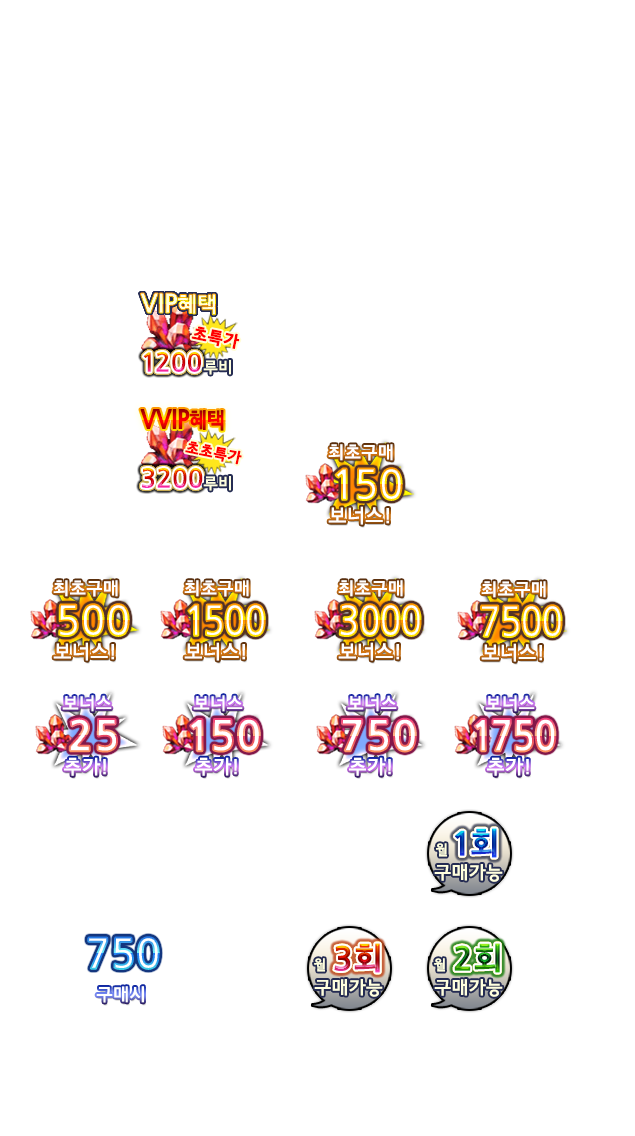
<style>
.page{position:relative;width:635px;height:1136px;background:#ffffff}
.page>*{position:absolute;margin:0}
.t1{font:25.6px "JejuGothic";letter-spacing:-0.05em;color:#ffffdf;font-weight:bold}
.t2{font:22px "JejuGothic";letter-spacing:-0.05em;color:#ffffdf;font-weight:bold}
.t3{font:16.7px "JejuGothic";color:#ff0000;font-weight:bold}
.t4{font:26px "JejuGothic"}
.t5{font:16px "JejuGothic";color:#ffffdf}
.t6{font:25.6px "JejuGothic";letter-spacing:-0.05em;font-weight:bold;scale:0.9 1}
.t7{font:22px "JejuGothic";letter-spacing:-0.05em;font-weight:bold;scale:0.9 1}
.t8{font:14.9px "JejuGothic";color:#ff0000;font-weight:bold}
.t9{font:18px "JejuGothic";color:#ffffff}
.t10{font:41.5px "JejuGothic"}
.t11{font:20px "JejuGothic";color:#ffffff}
.t12{font:41.5px "JejuGothic";letter-spacing:-0.05em;scale:0.9 1}
.t13{font:41.5px "JejuGothic";color:#ffffff;font-weight:bold}
.t14{font:41.5px "JejuGothic";letter-spacing:-0.05em;font-weight:bold;scale:0.9 1}
.t15{font:32px "JejuGothic";font-weight:bold}
.t16{font:14.1px "JejuGothic";color:#ffffdf}
.t17{font:18.7px "JejuGothic";color:#ffffdf}
</style>
<div class="page">
<p class="t1" style="left:140px;top:293px;width:76px;height:22px">VIP<span class="t2">혜택</span></p>
<p class="t3" style="left:191px;top:326px;width:49px;height:23px;rotate:12deg">초특가</p>
<p class="t4" style="left:143px;top:352px;width:58px;height:20px">1200</p>
<p class="t5" style="left:203px;top:360px;width:28px;height:15px">루비</p>
<p class="t6" style="left:140px;top:409px;width:84px;height:22px">VVIP<span class="t7">혜택</span></p>
<p class="t8" style="left:185px;top:441px;width:57px;height:24px;rotate:12deg">초초특가</p>
<p class="t9" style="left:328px;top:444px;width:65px;height:17px">최초구매</p>
<p class="t4" style="left:142px;top:468px;width:61px;height:20px">3200</p>
<p class="t10" style="left:335px;top:468px;width:67px;height:32px">150</p>
<p class="t5" style="left:203px;top:476px;width:28px;height:15px">루비</p>
<p class="t11" style="left:328px;top:506px;width:61px;height:19px">보너스!</p>
<p class="t9" style="left:53px;top:580px;width:65px;height:17px">최초구매</p>
<p class="t9" style="left:184px;top:580px;width:65px;height:17px">최초구매</p>
<p class="t9" style="left:338px;top:580px;width:65px;height:17px">최초구매</p>
<p class="t9" style="left:481px;top:581px;width:65px;height:17px">최초구매</p>
<p class="t10" style="left:59px;top:604px;width:70px;height:32px">500</p>
<p class="t12" style="left:188px;top:604px;width:77px;height:32px">1500</p>
<p class="t12" style="left:339px;top:604px;width:82px;height:32px">3000</p>
<p class="t12" style="left:481px;top:605px;width:81px;height:32px">7500</p>
<p class="t11" style="left:53px;top:642px;width:61px;height:19px">보너스!</p>
<p class="t11" style="left:184px;top:642px;width:61px;height:19px">보너스!</p>
<p class="t11" style="left:338px;top:642px;width:61px;height:19px">보너스!</p>
<p class="t11" style="left:481px;top:643px;width:61px;height:19px">보너스!</p>
<p class="t9" style="left:62px;top:695px;width:50px;height:17px">보너스</p>
<p class="t9" style="left:193px;top:695px;width:50px;height:17px">보너스</p>
<p class="t9" style="left:347px;top:695px;width:50px;height:17px">보너스</p>
<p class="t9" style="left:485px;top:695px;width:50px;height:17px">보너스</p>
<p class="t13" style="left:69px;top:718px;width:48px;height:34px">25</p>
<p class="t13" style="left:190px;top:718px;width:70px;height:34px">150</p>
<p class="t13" style="left:342px;top:718px;width:74px;height:34px">750</p>
<p class="t14" style="left:474px;top:718px;width:82px;height:34px">1750</p>
<p class="t11" style="left:64px;top:757px;width:42px;height:19px">추가!</p>
<p class="t11" style="left:195px;top:757px;width:42px;height:19px">추가!</p>
<p class="t11" style="left:349px;top:757px;width:42px;height:19px">추가!</p>
<p class="t11" style="left:487px;top:757px;width:42px;height:19px">추가!</p>
<p class="t15" style="left:455px;top:828px;width:42px;height:30px">1회</p>
<p class="t16" style="left:436px;top:843px;width:11px;height:14px">월</p>
<p class="t17" style="left:434px;top:864px;width:69px;height:18px">구매가능</p>
<p class="t10" style="left:88px;top:937px;width:71px;height:32px">750</p>
<p class="t15" style="left:334px;top:943px;width:46px;height:30px">3회</p>
<p class="t15" style="left:454px;top:943px;width:46px;height:30px">2회</p>
<p class="t16" style="left:314px;top:958px;width:11px;height:14px">월</p>
<p class="t16" style="left:434px;top:958px;width:11px;height:14px">월</p>
<p class="t9" style="left:96px;top:986px;width:48px;height:17px">구매시</p>
<p class="t17" style="left:314px;top:979px;width:69px;height:18px">구매가능</p>
<p class="t17" style="left:434px;top:979px;width:69px;height:18px">구매가능</p>
</div>
